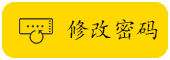
<style>
.page{position:relative;width:170px;height:60px;background:#ffd800}
.page>*{position:absolute;margin:0}
.t1{font:23.3px "¿¬Ìå";color:#000000}
</style>
<div class="page">
<p class="t1" style="left:67px;top:19px;width:91px;height:21px">修改密码</p>
</div>
